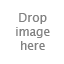
<style>
.page{position:relative;width:64px;height:64px;background:#ffffff}
.page>*{position:absolute;margin:0}
.t1{font:12px "LucidaGrande";color:#828282}
</style>
<div class="page">
<p class="t1" style="left:16px;top:13px;width:34px;height:37px;text-align:center">Drop<br>image<br>here</p>
</div>
